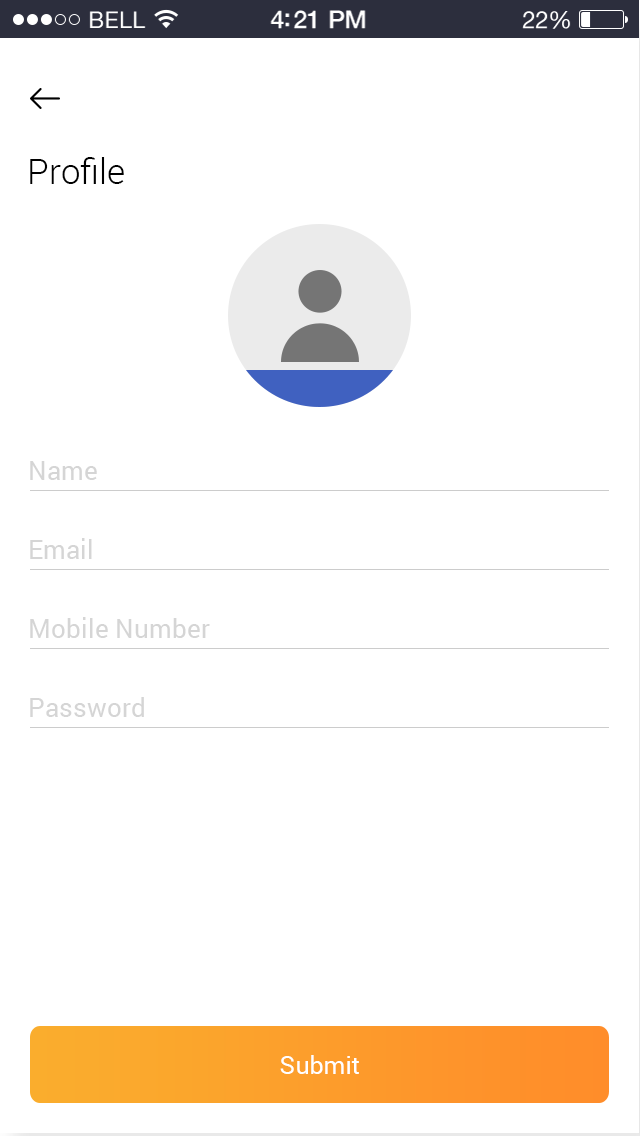
<style>
.page{position:relative;width:640px;height:1136px;background:#ffffff}
.page>*{position:absolute;margin:0}
.t1{font:35px "Roboto-Light";color:#000000}
.t2{font:26px "Roboto-Regular";color:#d5d5d5}
.t3{font:25px "Roboto-Regular";color:#ffffff}
</style>
<div class="page">
<p class="t1" style="left:30px;top:157px;width:94px;height:27px">Profile</p>
<p class="t2" style="left:30px;top:461px;width:67px;height:19px">Name</p>
<p class="t2" style="left:30px;top:538px;width:62px;height:21px">Email</p>
<p class="t2" style="left:30px;top:617px;width:180px;height:21px">Mobile Number</p>
<p class="t2" style="left:30px;top:697px;width:114px;height:20px">Password</p>
<p class="t3" style="left:280px;top:1055px;width:79px;height:19px">Submit</p>
</div>
